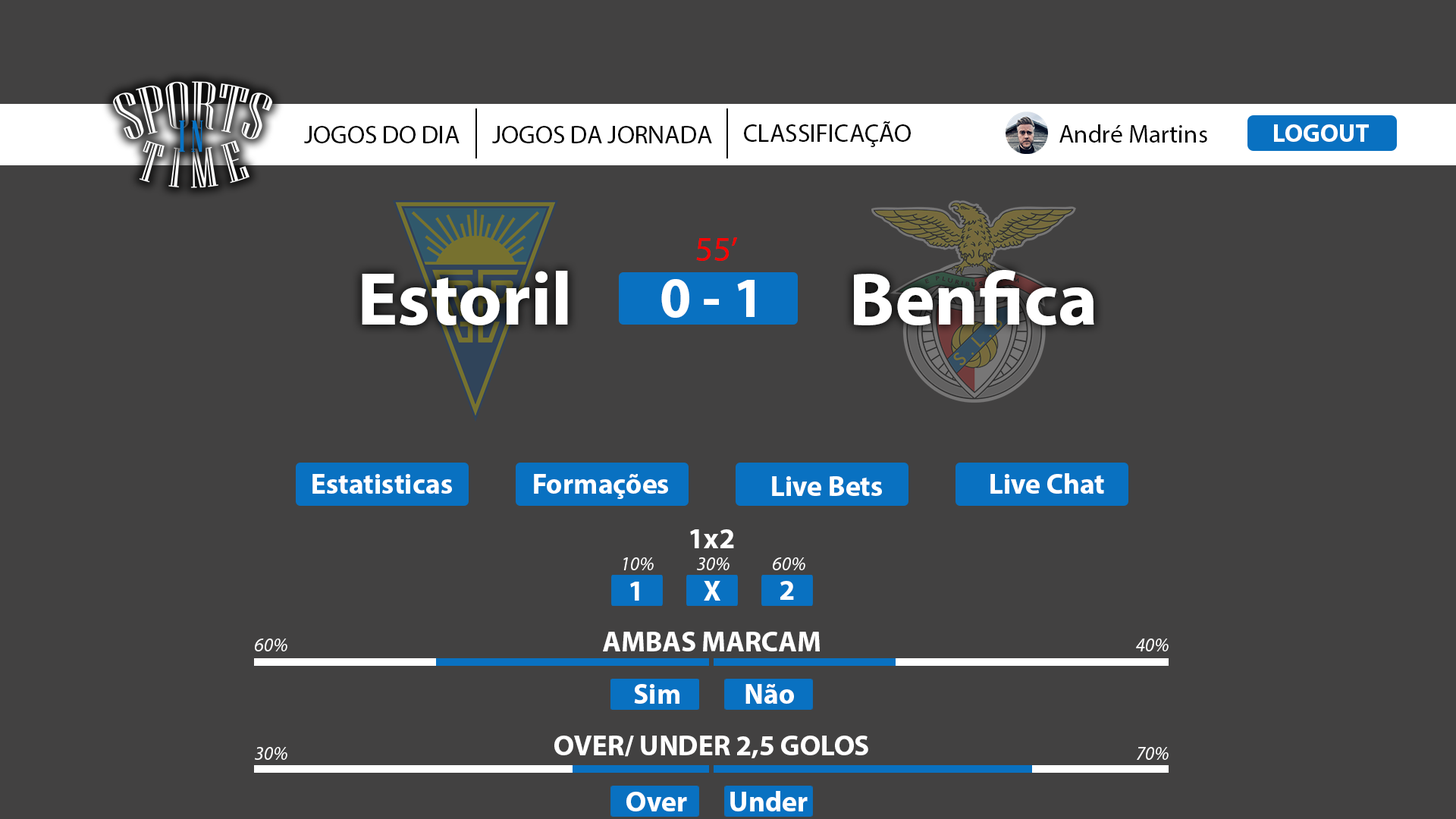
<style>
.page{position:relative;width:1456px;height:819px;background:#424141}
.page>*{position:absolute;margin:0}
.t1{font:25.3px "MyriadPro-Regular";color:#000000}
.t2{font:34.8px "MyriadPro-Regular";color:#ff0000}
.t3{font:75.8px "MyriadPro-Bold";color:#ffffff}
.t4{font:56.9px "MyriadPro-Bold";color:#ffffff}
.t5{font:28.4px "MyriadPro-Bold";color:#ffffff}
.t6{font:19px "MyriadPro-It";color:#ffffff}
</style>
<div class="page">
<p class="t1" style="left:304px;top:126px;width:156px;height:17px">JOGOS DO DIA</p>
<p class="t1" style="left:492px;top:126px;width:220px;height:17px">JOGOS DA JORNADA</p>
<p class="t1" style="left:744px;top:121px;width:167px;height:26px">CLASSIFICAÇÃO</p>
<p class="t1" style="left:1059px;top:124px;width:148px;height:19px">André Martins</p>
<p class="t2" style="left:696px;top:237px;width:41px;height:24px">55’</p>
<p class="t3" style="left:854px;top:270px;width:240px;height:55px">Benfica</p>
<p class="t3" style="left:362px;top:271px;width:206px;height:54px">Estoril</p>
<p class="t4" style="left:661px;top:279px;width:94px;height:39px">0 - 1</p>
<p class="t5" style="left:312px;top:474px;width:140px;height:20px">Estatisticas</p>
<p class="t5" style="left:534px;top:474px;width:134px;height:25px">Formações</p>
<p class="t5" style="left:990px;top:473px;width:114px;height:21px">Live Chat</p>
<p class="t5" style="left:772px;top:476px;width:110px;height:20px">Live Bets</p>
<p class="t5" style="left:690px;top:529px;width:44px;height:19px">1x2</p>
<p class="t6" style="left:623px;top:557px;width:31px;height:13px">10%</p>
<p class="t6" style="left:697px;top:557px;width:33px;height:13px">30%</p>
<p class="t6" style="left:773px;top:557px;width:32px;height:13px">60%</p>
<p class="t5" style="left:630px;top:582px;width:9px;height:19px">1</p>
<p class="t5" style="left:704px;top:581px;width:16px;height:20px">X</p>
<p class="t5" style="left:780px;top:581px;width:14px;height:19px">2</p>
<p class="t6" style="left:255px;top:639px;width:32px;height:12px">60%</p>
<p class="t5" style="left:603px;top:632px;width:217px;height:19px">AMBAS MARCAM</p>
<p class="t6" style="left:1136px;top:639px;width:33px;height:12px">40%</p>
<p class="t5" style="left:634px;top:684px;width:45px;height:20px">Sim</p>
<p class="t5" style="left:634px;top:684px;width:45px;height:20px">Sim</p>
<p class="t5" style="left:745px;top:684px;width:49px;height:20px">Não</p>
<p class="t5" style="left:554px;top:736px;width:314px;height:22px">OVER/ UNDER 2,5 GOLOS</p>
<p class="t6" style="left:255px;top:747px;width:32px;height:13px">30%</p>
<p class="t6" style="left:1137px;top:747px;width:32px;height:13px">70%</p>
<p class="t5" style="left:626px;top:792px;width:61px;height:19px">Over</p>
<p class="t5" style="left:730px;top:791px;width:78px;height:20px">Under</p>
</div>
